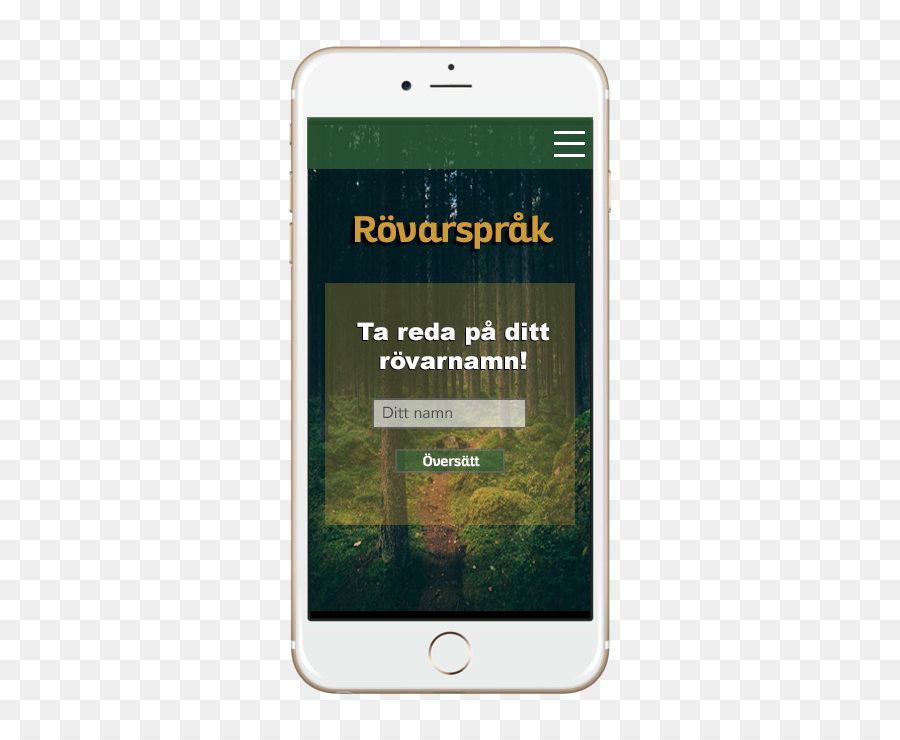
<style>
.page{position:relative;width:900px;height:740px;background:#ffffff}
.page>*{position:absolute;margin:0}
.t1{font:36px "Altair-Bold";color:#ce9a3a}
.t2{font:24px "Arial-Black";color:#fcfcfc}
.t3{font:16px "Avenir-Roman";color:#4c4d47}
.t4{font:14px "Altair-Bold";color:#fcfcfc}
</style>
<div class="page">
<p class="t1" style="left:354px;top:212px;width:200px;height:37px">Rövarspråk</p>
<p class="t2" style="left:357px;top:320px;width:192px;height:50px;text-align:center">Ta reda på ditt rövarnamn!</p>
<p class="t3" style="left:383px;top:406px;width:69px;height:13px">Ditt namn</p>
<p class="t4" style="left:423px;top:453px;width:57px;height:14px">Översätt</p>
</div>
